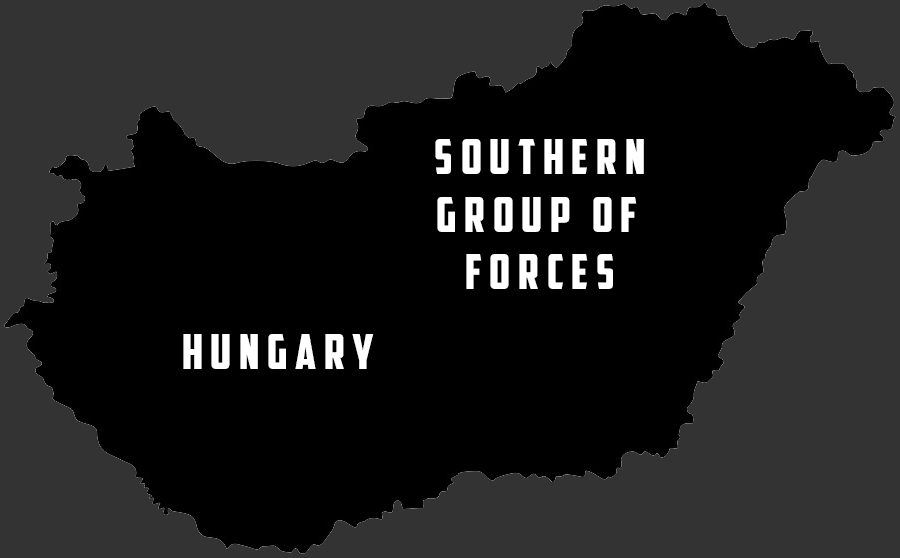
<style>
.page{position:relative;width:900px;height:558px;background:#000000}
.page>*{position:absolute;margin:0}
.t1{font:48px "AmericanCaptain";letter-spacing:0.16em;color:#ffffff}
</style>
<div class="page">
<p class="t1" style="left:435px;top:139px;width:209px;height:150px;text-align:center">Southern<br>Group of <br>Forces</p>
<p class="t1" style="left:183px;top:334px;width:191px;height:35px">hungary</p>
</div>
